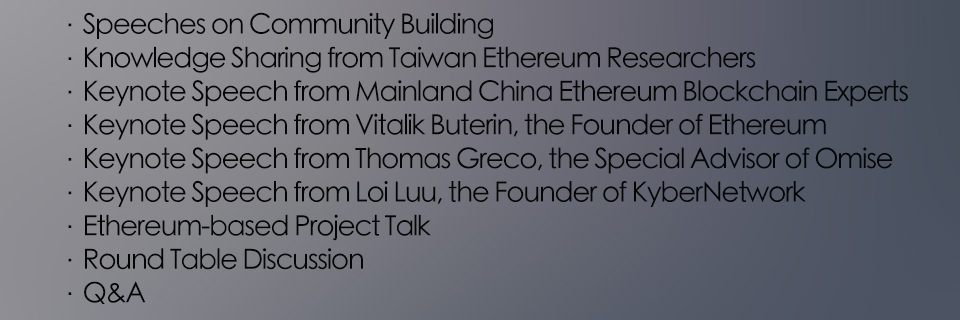
<style>
.page{position:relative;width:960px;height:320px}
.page>*{position:absolute;margin:0}
.t1{font:28px "STHeitiSC-Light";letter-spacing:-0.05em;color:#040505}
</style>
<div class="page">
<p class="t1" style="left:68px;top:12px;width:840px;height:292px">·Speeches on Community Building <br>·Knowledge Sharing from Taiwan Ethereum Researchers<br>·Keynote Speech from Mainland China Ethereum Blockchain Experts<br>·Keynote Speech from Vitalik Buterin, the Founder of Ethereum<br>·Keynote Speech from Thomas Greco, the Special Advisor of Omise<br>·Keynote Speech from Loi Luu, the Founder of KyberNetwork<br>·Ethereum-based Project Talk<br>·Round Table Discussion<br>·Q&amp;A</p>
</div>
